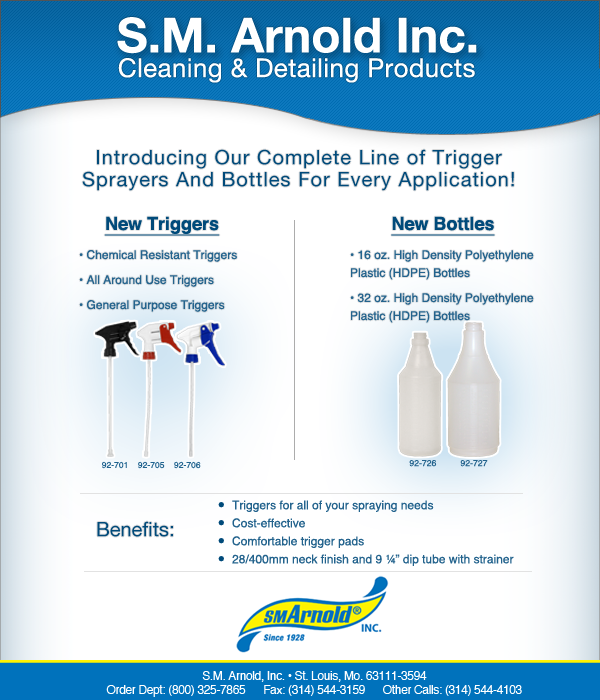
<style>
.page{position:relative;width:600px;height:700px;background:#ffffff}
.page>*{position:absolute;margin:0}
.t1{font:48px "HelveticaNeue-Bold";color:#ffffff}
.t2{font:26px "HelveticaNeue";letter-spacing:0.015em;color:#ffffff}
.t3{font:20px/22px "HelveticaNeue";letter-spacing:0.05em;color:#004a7a}
.t4{font:12px/25px "Helvetica";color:#23638d}
.t5{font:18px "Helvetica-Bold";color:#004a7a;text-decoration:underline}
.t6{font:18px/5px "Helvetica-Bold";color:#004a7a;text-decoration:underline}
.t7{font:12px/18px "Helvetica";color:#23638d}
.t8{font:8.5px "Helvetica";color:#23638d}
.t9{font:8.7px "Helvetica";color:#23638d}
.t10{font:24px/18px "Helvetica-Bold";color:#004a7a}
.t11{font:20px "HelveticaNeue";color:#004a7a}
.t12{font:12px "Helvetica";letter-spacing:-0.03em;color:#ffffff}
</style>
<div class="page">
<p class="t1" style="left:117px;top:17px;width:360px;height:37px">S.M. Arnold Inc.</p>
<p class="t2" style="left:118px;top:58px;width:357px;height:25px">Cleaning &amp; Detailing Products</p>
<p class="t3" style="left:82px;top:149px;width:432px;height:42px;text-align:center">Introducing Our Complete Line of Trigger <br>Sprayers And Bottles For Every Application!</p>
<p class="t4" style="left:79px;top:216px;width:158px;height:96px;text-align:center"><span class="t5">New Triggers<br></span>• Chemical Resistant Triggers <br>• All Around Use Triggers <br>• General Purpose Triggers</p>
<p class="t4" style="left:350px;top:216px;width:184px;height:107px;text-align:center"><span class="t6">New Bottles<br></span>• 16 oz. High Density Polyethylene <br><span class="t7">Plastic (HDPE) Bottles</span><br>• 32 oz. High Density Polyethylene <br><span class="t7">Plastic (HDPE) Bottles</span></p>
<p class="t8" style="left:102px;top:461px;width:99px;height:8px">92-701    92-705    92-706</p>
<p class="t9" style="left:409px;top:460px;width:79px;height:7px">92-726          92-727</p>
<p class="t7" style="left:218px;top:500px;width:296px;height:66px"><span class="t10">• </span>Triggers for all of your spraying needs<br><span class="t10">• </span>Cost-effective<br><span class="t10">• </span>Comfortable trigger pads<br><span class="t10">• </span>28/400mm neck finish and 9 ¼” dip tube with strainer</p>
<p class="t11" style="left:97px;top:521px;width:76px;height:16px">Benefits:</p>
<p class="t12" style="left:106px;top:671px;width:416px;height:26px;text-align:center">S.M. Arnold, Inc. • St. Louis, Mo. 63111-3594<br>Order Dept: (800) 325-7865      Fax: (314) 544-3159      Other Calls: (314) 544-4103</p>
</div>
